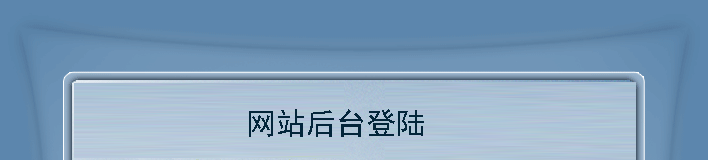
<style>
.page{position:relative;width:708px;height:160px;background:#5c86ad}
.page>*{position:absolute;margin:0}
.t1{font:30px "SimHei";color:#03253a}
</style>
<div class="page">
<p class="t1" style="left:249px;top:109px;width:175px;height:28px">网站后台登陆</p>
</div>
